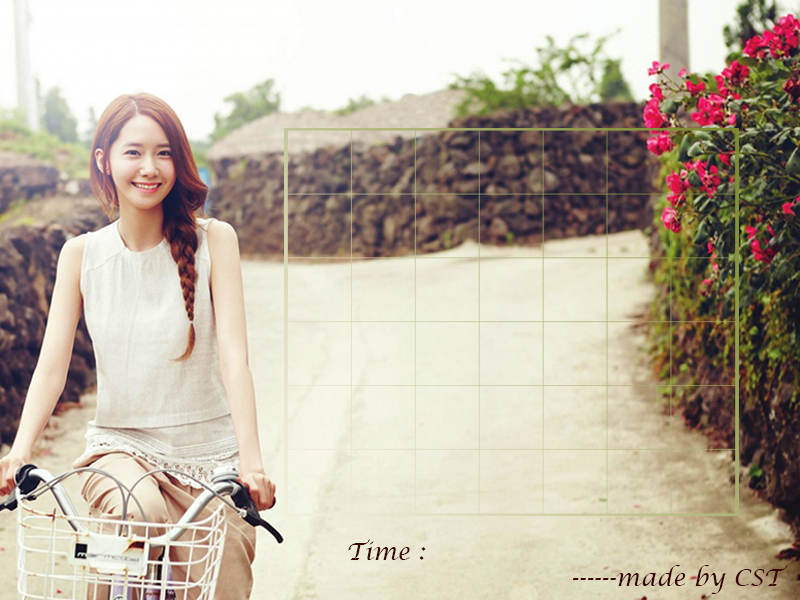
<style>
.page{position:relative;width:800px;height:600px}
.page>*{position:absolute;margin:0}
.t1{font:24px "LucidaCalligraphy-Italic";color:#3b0808}
</style>
<div class="page">
<p class="t1" style="left:348px;top:539px;width:78px;height:21px">Time :</p>
<p class="t1" style="left:572px;top:565px;width:216px;height:29px">------made by CST</p>
</div>
